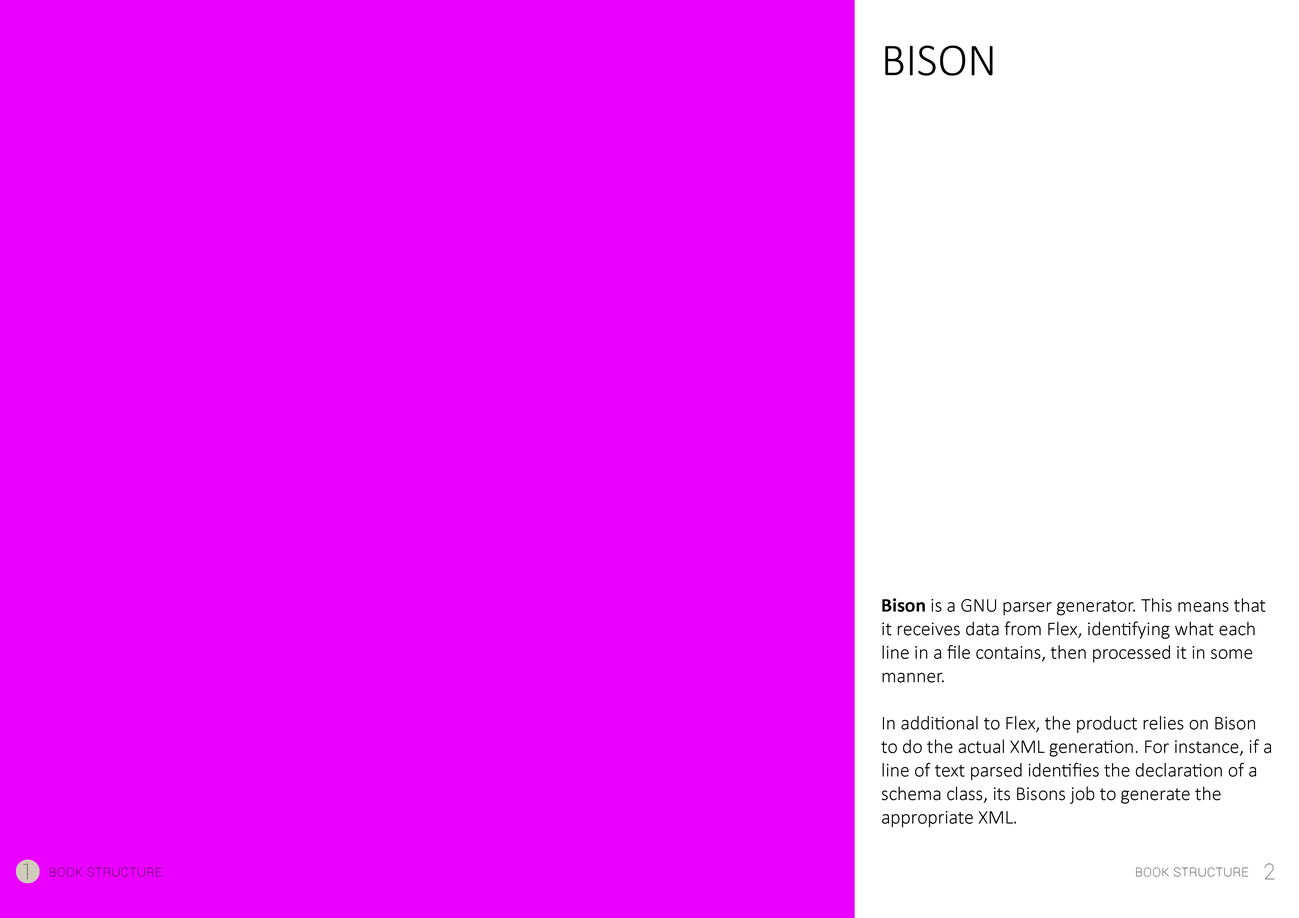
<style>
.page{position:relative;width:1299px;height:918px;background:#ea00ff}
.page>*{position:absolute;margin:0}
.t1{font:45.8px "Calibri-Light";color:#000000;text-transform:uppercase}
.t2{font:19.6px "Calibri-Light";color:#000000}
.t3{font:19.6px "Calibri-Bold";color:#000000}
.t4{font:21.8px "Roboto-Thin";color:#484848}
.t5{font:15.3px "Roboto-Thin";color:#000000;font-variant:small-caps}
</style>
<div class="page">
<p class="t1" style="left:885px;top:46px;width:107px;height:30px">bison</p>
<p class="t2" style="left:881px;top:598px;width:390px;height:229px"><span class="t3">Bison </span>is a GNU parser generator. This means that it receives data from Flex, identifying what each line in a file contains, then processed it in some manner.<br><br>In additional to Flex, the product relies on Bison to do the actual XML generation. For instance, if a line of text parsed identifies the declaration of a schema class, its Bisons job to generate the appropriate XML.</p>
<p class="t4" style="left:23px;top:864px;width:5px;height:16px">1</p>
<p class="t5" style="left:50px;top:868px;width:112px;height:9px">Book structure</p>
<p class="t5" style="left:1136px;top:868px;width:112px;height:9px">Book structure</p>
<p class="t4" style="left:1264px;top:864px;width:10px;height:16px">2</p>
</div>
